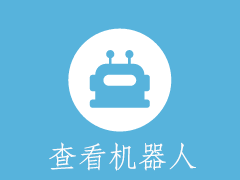
<style>
.page{position:relative;width:240px;height:180px;background:#57b3dc}
.page>*{position:absolute;margin:0}
.t1{font:30px "STFangsong";color:#fdfcfc}
</style>
<div class="page">
<p class="t1" style="left:49px;top:142px;width:147px;height:29px">查看机器人</p>
</div>
